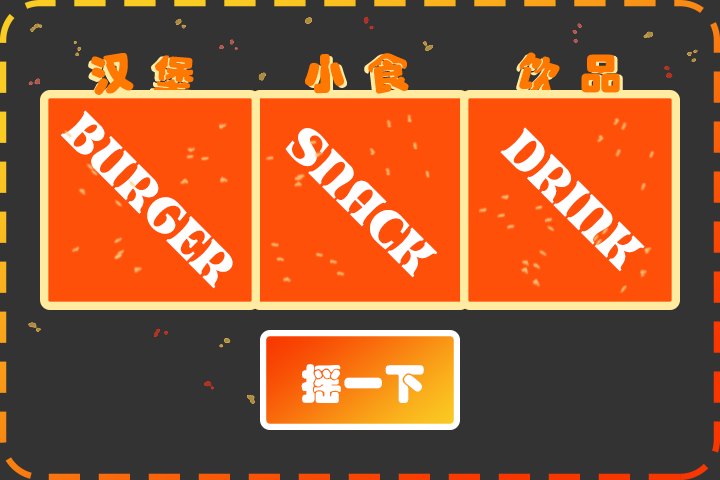
<style>
.page{position:relative;width:720px;height:480px;background:#333333}
.page>*{position:absolute;margin:0}
.t1{font:41.7px "STHupo";color:#ff7800}
.t2{font:41.7px "STHupo"}
.t3{font:50px "Kabal-Regular";color:#ffffff}
.t4{font:41.7px "STHupo";color:#ffffff}
</style>
<div class="page">
<p class="t1" style="left:91px;top:53px;width:43px;height:42px;rotate:-9deg">汉</p>
<p class="t1" style="left:305px;top:54px;width:39px;height:40px;rotate:-1deg">小</p>
<p class="t2" style="left:364px;top:54px;width:41px;height:41px;rotate:-6deg">食</p>
<p class="t1" style="left:368px;top:53px;width:41px;height:41px;rotate:-6deg">食</p>
<p class="t2" style="left:516px;top:54px;width:41px;height:46px;rotate:16deg">饮</p>
<p class="t1" style="left:519px;top:52px;width:41px;height:46px;rotate:16deg">饮</p>
<p class="t1" style="left:581px;top:54px;width:39px;height:39px">品</p>
<p class="t2" style="left:88px;top:57px;width:43px;height:42px;rotate:-9deg">汉</p>
<p class="t2" style="left:149px;top:56px;width:41px;height:42px;rotate:4deg">堡</p>
<p class="t1" style="left:153px;top:55px;width:41px;height:42px;rotate:4deg">堡</p>
<p class="t2" style="left:308px;top:56px;width:39px;height:40px;rotate:-1deg">小</p>
<p class="t1" style="left:584px;top:55px;width:39px;height:39px">品</p>
<p class="t3" style="left:60px;top:110px;width:173px;height:179px;rotate:45deg">BURGER</p>
<p class="t3" style="left:285px;top:128px;width:153px;height:150px;rotate:45deg">SNACK</p>
<p class="t3" style="left:500px;top:127px;width:145px;height:145px;rotate:45deg">DRINK</p>
<p class="t4" style="left:301px;top:364px;width:123px;height:39px">摇一下</p>
</div>
